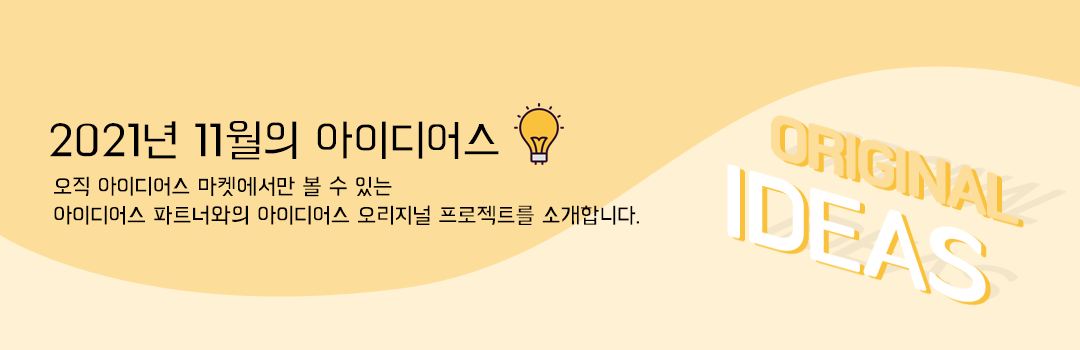
<style>
.page{position:relative;width:1080px;height:350px;background:#fddd9a}
.page>*{position:absolute;margin:0}
.t1{font:48px "BMHANNAAir";letter-spacing:-0.02em;color:#000000}
.t2{font:24px "BMHANNAAir";letter-spacing:-0.02em;color:#000000}
</style>
<div class="page">
<p class="t1" style="left:50px;top:121px;width:449px;height:39px">2021년 11월의 아이디어스</p>
<p class="t2" style="left:54px;top:176px;width:585px;height:49px">오직 아이디어스 마켓에서만 볼 수 있는 <br>아이디어스 파트너와의 아이디어스 오리지널 프로젝트를 소개합니다.</p>
</div>
